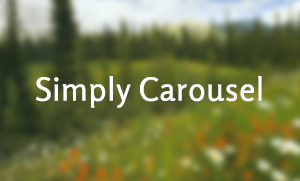
<style>
.page{position:relative;width:300px;height:181px}
.page>*{position:absolute;margin:0}
.t1{font:32px "Rosario-Regular";color:#ffffff;font-weight:bold}
</style>
<div class="page">
<p class="t1" style="left:35px;top:76px;width:227px;height:32px">Simply Carousel</p>
</div>
